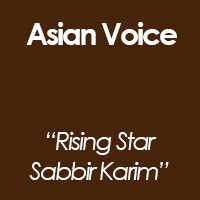
<style>
.page{position:relative;width:200px;height:200px;background:#452407}
.page>*{position:absolute;margin:0}
.t1{font:30px "CenturyGothic-Bold";letter-spacing:-0.075em;color:#ffffff}
.t2{font:25px "CenturyGothic-Italic";letter-spacing:-0.075em;color:#ffffff}
</style>
<div class="page">
<p class="t1" style="left:26px;top:22px;width:151px;height:23px">Asian Voice</p>
<p class="t2" style="left:29px;top:132px;width:140px;height:48px;text-align:center">“Rising Star<br>Sabbir Karim”</p>
</div>
